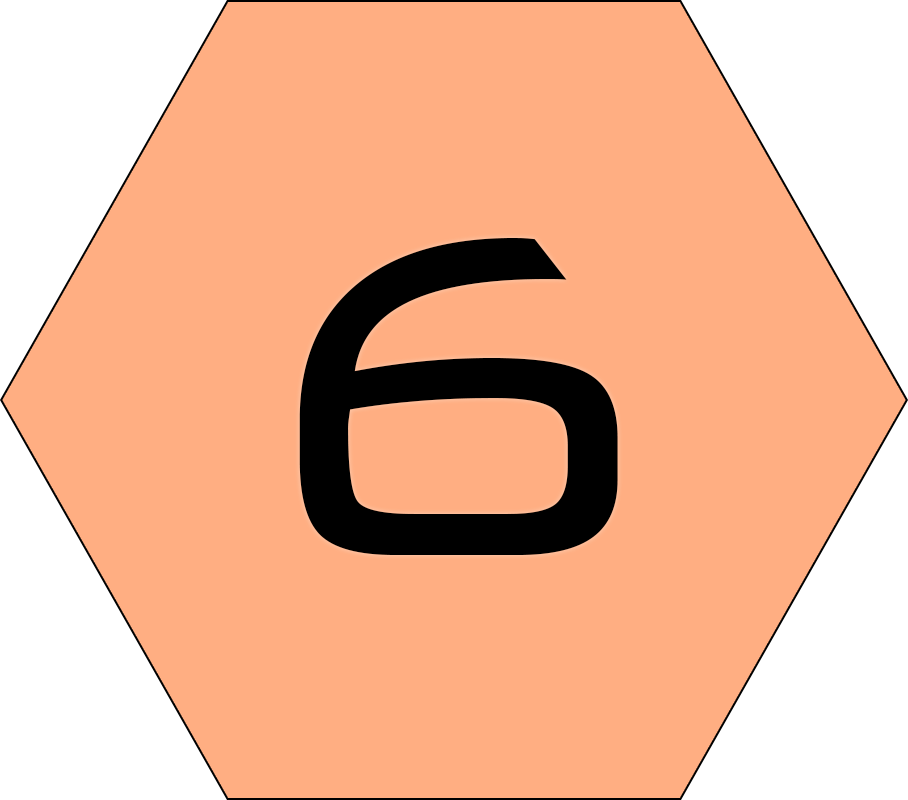
<style>
.page{position:relative;width:908px;height:800px;background:#ffae82}
.page>*{position:absolute;margin:0}
.t1{font:600px "BankGothicBT-Light";color:#000000}
</style>
<div class="page">
<p class="t1" style="left:299px;top:238px;width:319px;height:317px">6</p>
</div>
